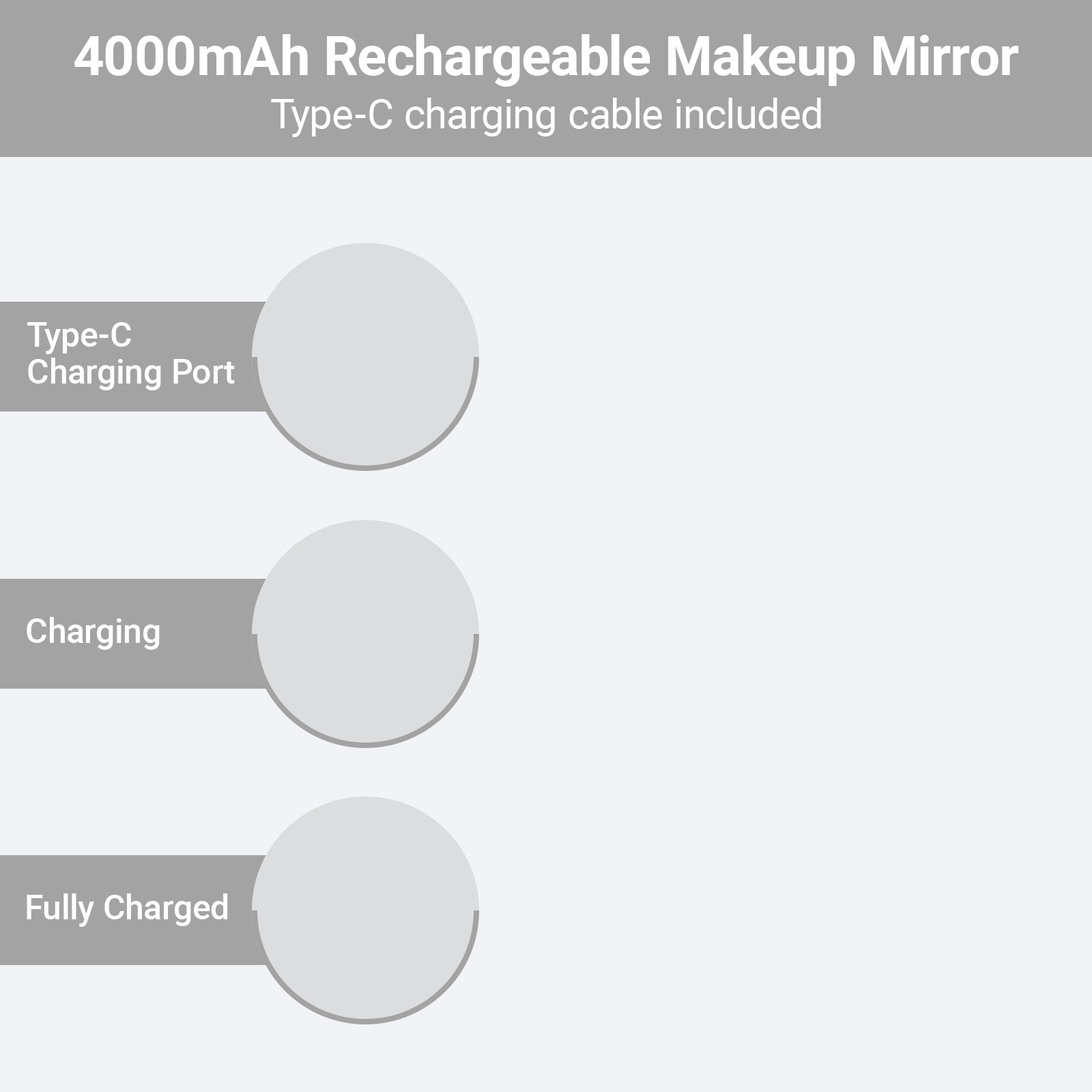
<style>
.page{position:relative;width:1092px;height:1092px;background:#f2f3f6}
.page>*{position:absolute;margin:0}
.t1{font:54.6px "Roboto-Bold";color:#ffffff}
.t2{font:40.9px "Roboto-Regular";color:#ffffff}
.t3{font:34.1px/36.9px "Roboto-Medium";color:#ffffff}
.t4{font:34.1px "Roboto-Medium";color:#ffffff}
</style>
<div class="page">
<p class="t1" style="left:74px;top:34px;width:945px;height:53px">4000mAh Rechargeable Makeup Mirror</p>
<p class="t2" style="left:271px;top:98px;width:550px;height:39px">Type-C charging cable included</p>
<p class="t3" style="left:27px;top:322px;width:208px;height:68px">Type-C<br>Charging Port</p>
<p class="t4" style="left:27px;top:617px;width:133px;height:33px">Charging</p>
<p class="t4" style="left:27px;top:893px;width:201px;height:34px">Fully Charged</p>
</div>
